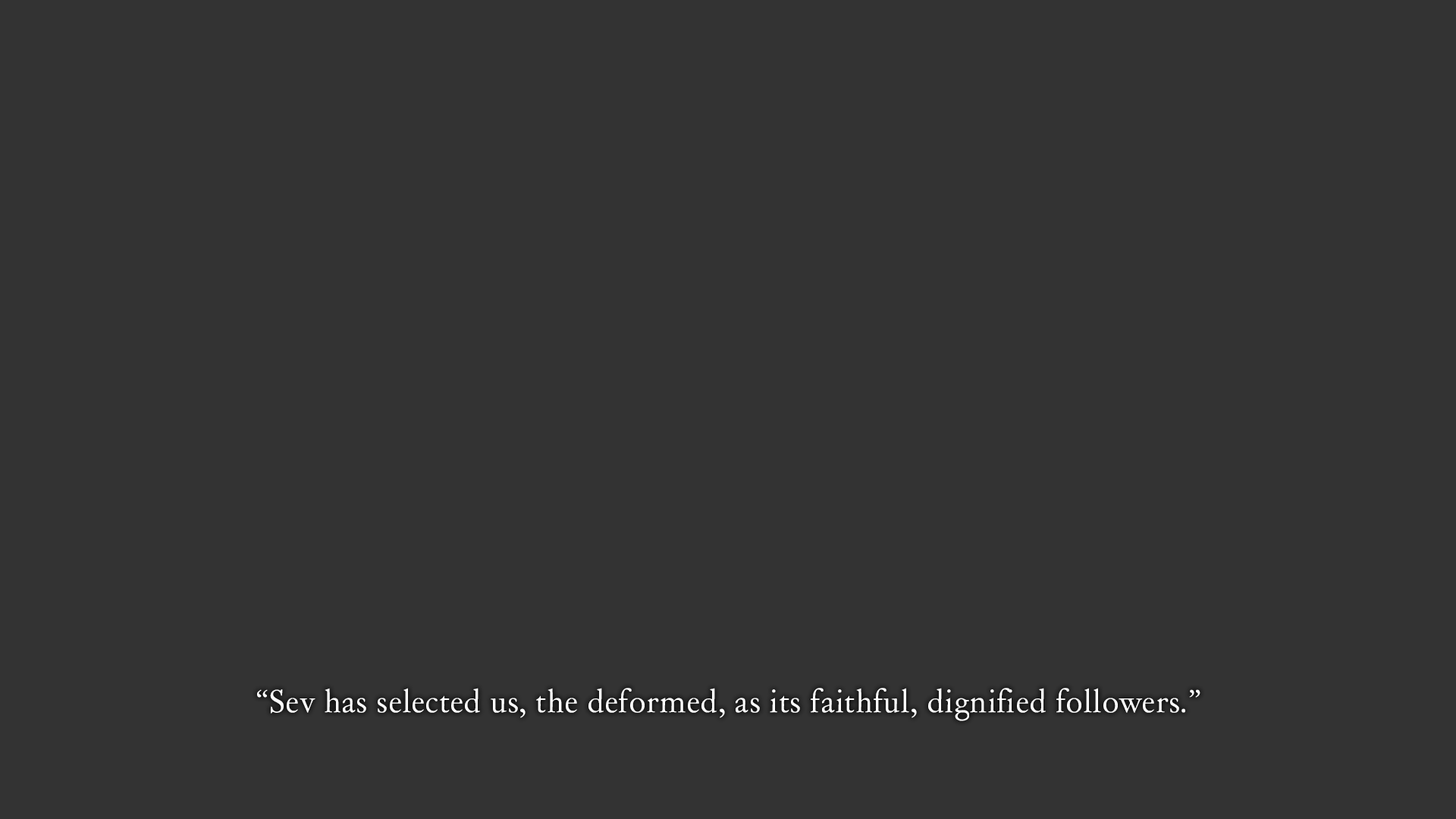
<style>
.page{position:relative;width:1456px;height:819px;background:#333333}
.page>*{position:absolute;margin:0}
.t1{font:30.3px "DayRoman";color:#ffffff}
</style>
<div class="page">
<p class="t1" style="left:257px;top:688px;width:943px;height:33px">“Sev has selected us, the deformed, as its faithful, dignified followers.”</p>
</div>
